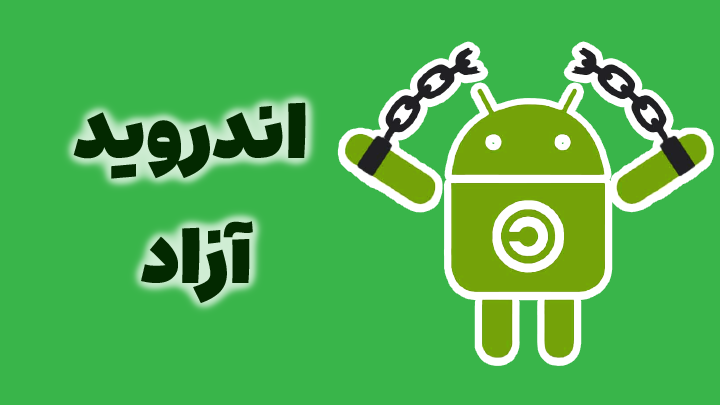
<style>
.page{position:relative;width:720px;height:405px;background:#39b54a}
.page>*{position:absolute;margin:0}
.t1{font:75px/125px "EstedadMad-Fat";color:#042a00}
</style>
<div class="page">
<p class="t1" style="left:73px;top:102px;width:233px;height:201px;text-align:center">اندروید <br>آزاد</p>
</div>
